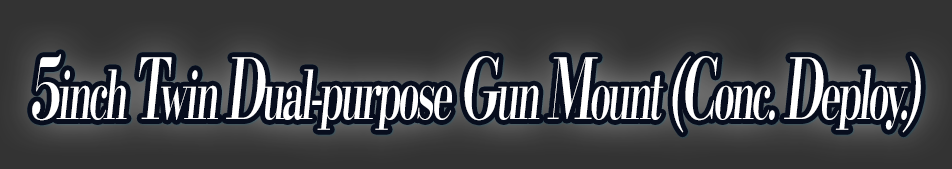
<style>
.page{position:relative;width:952px;height:169px;background:#333333}
.page>*{position:absolute;margin:0}
.t1{font:67.2px "KochoStd-Heavy";letter-spacing:-0.08em;color:#ffffff;font-style:italic;scale:0.57 1}
.t2{font:84px "KochoStd-Heavy";letter-spacing:-0.08em;color:#ffffff;font-style:italic;scale:0.57 1}
</style>
<div class="page">
<p class="t1" style="left:32px;top:54px;width:889px;height:79px"><span class="t2">5</span>inch <span class="t2">T</span>win <span class="t2">D</span>ual-purpose <span class="t2">G</span>un <span class="t2">M</span>ount <span class="t2">(C</span>onc. <span class="t2">D</span>eploy.<span class="t2">)</span></p>
</div>
